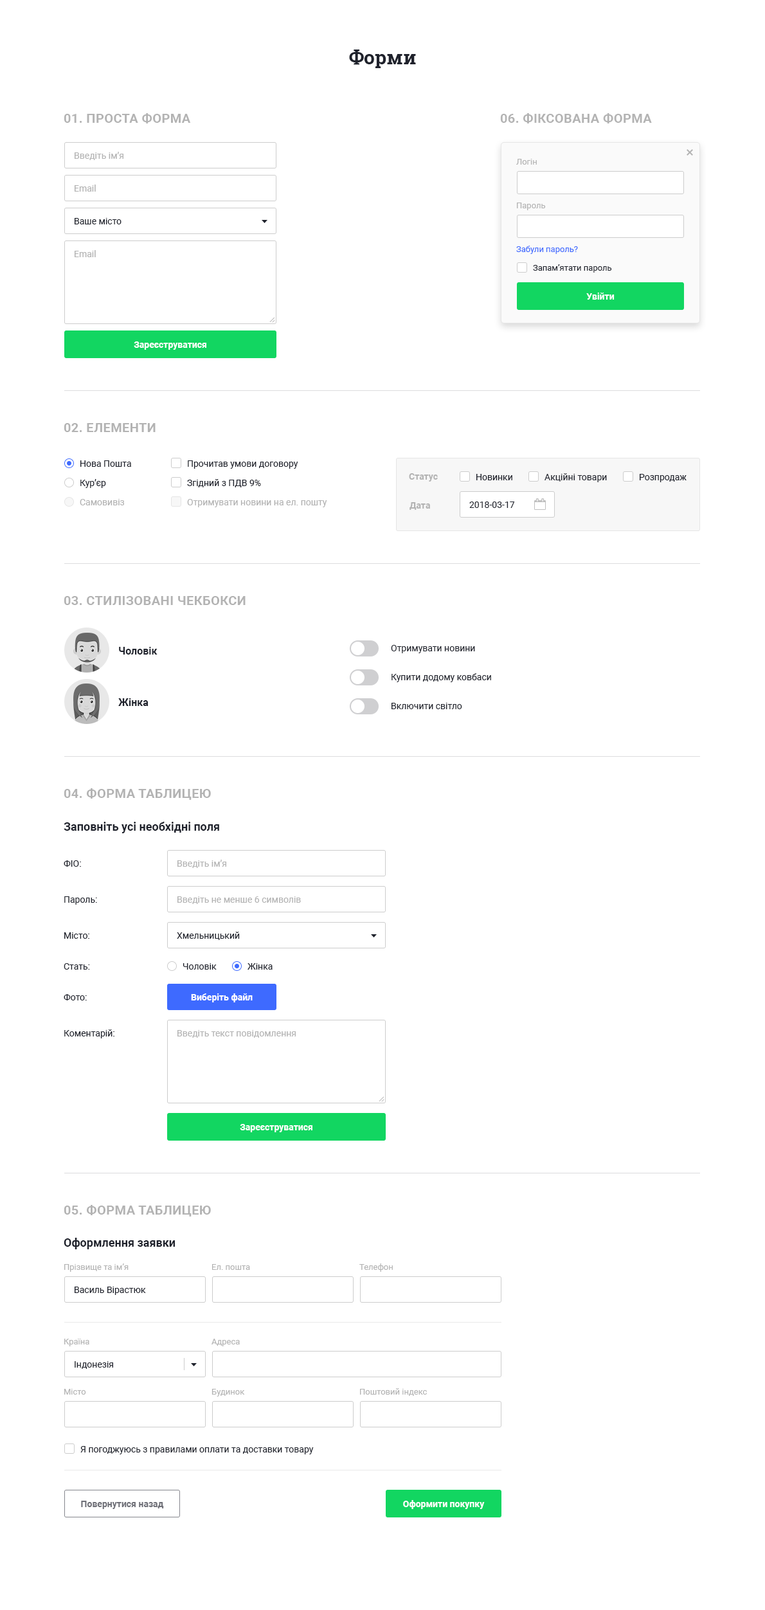
<style>
.page{position:relative;width:765px;height:1610px;background:#ffffff}
.page>*{position:absolute;margin:0}
.t1{font:19.3px "RobotoSlab-Bold";color:#1f222c}
.t2{font:12.9px "Roboto-Bold";letter-spacing:0.02em;color:#b3b3b3;text-transform:uppercase}
.t3{font:9px "Roboto-Regular";color:#b3b3b3}
.t4{font:8.4px "Roboto-Regular";color:#b3b3b3}
.t5{font:9px "Roboto-Regular";color:#1f222c}
.t6{font:8.4px "Roboto-Regular";color:#3e6aff}
.t7{font:8.4px "Roboto-Regular";color:#1f222c}
.t8{font:9px "Roboto-Bold";color:#ffffff}
.t9{font:9px "Roboto-Bold";color:#b3b3b3}
.t10{font:10.3px "Roboto-Bold";color:#1f222c}
.t11{font:11.6px "Roboto-Bold";color:#1f222c}
.t12{font:9px "Roboto-Bold";color:#6e6f77}
</style>
<div class="page">
<p class="t1" style="left:349px;top:50px;width:67px;height:18px">Форми</p>
<p class="t2" style="left:64px;top:113px;width:127px;height:10px">01. проста форма</p>
<p class="t2" style="left:500px;top:113px;width:152px;height:10px">06. фіксована форма</p>
<p class="t3" style="left:75px;top:152px;width:48px;height:8px">Введіть ім’я</p>
<p class="t4" style="left:516px;top:159px;width:21px;height:6px">Логін</p>
<p class="t3" style="left:75px;top:184px;width:21px;height:8px">Email</p>
<p class="t4" style="left:517px;top:203px;width:29px;height:7px">Пароль</p>
<p class="t5" style="left:75px;top:218px;width:47px;height:6px">Ваше місто</p>
<p class="t6" style="left:516px;top:246px;width:62px;height:8px">Забули пароль?</p>
<p class="t3" style="left:75px;top:250px;width:21px;height:7px">Email</p>
<p class="t7" style="left:533px;top:264px;width:79px;height:9px">Запам’ятати пароль</p>
<p class="t8" style="left:586px;top:292px;width:29px;height:8px">Увійти</p>
<p class="t8" style="left:134px;top:341px;width:72px;height:9px">Зареєструватися</p>
<p class="t2" style="left:64px;top:423px;width:92px;height:9px">02. елементи</p>
<p class="t5" style="left:80px;top:460px;width:51px;height:7px">Нова Пошта</p>
<p class="t5" style="left:188px;top:460px;width:110px;height:9px">Прочитав умови договору</p>
<p class="t9" style="left:409px;top:473px;width:29px;height:9px">Статус</p>
<p class="t5" style="left:476px;top:474px;width:36px;height:6px">Новинки</p>
<p class="t5" style="left:544px;top:473px;width:63px;height:9px">Акційні товари</p>
<p class="t5" style="left:640px;top:474px;width:47px;height:8px">Розпродаж</p>
<p class="t5" style="left:80px;top:479px;width:26px;height:9px">Кур’єр</p>
<p class="t5" style="left:187px;top:479px;width:74px;height:8px">Згідний з ПДВ 9%</p>
<p class="t3" style="left:80px;top:499px;width:44px;height:6px">Самовивіз</p>
<p class="t3" style="left:187px;top:499px;width:140px;height:8px">Отримувати новини на ел. пошту</p>
<p class="t9" style="left:410px;top:502px;width:20px;height:8px">Дата</p>
<p class="t5" style="left:469px;top:501px;width:46px;height:7px">2018-03-17</p>
<p class="t2" style="left:64px;top:596px;width:182px;height:9px">03. стилізовані чекбокси</p>
<p class="t10" style="left:119px;top:647px;width:39px;height:7px">Чоловік</p>
<p class="t5" style="left:391px;top:645px;width:84px;height:8px">Отримувати новини</p>
<p class="t5" style="left:392px;top:673px;width:99px;height:9px">Купити додому ковбаси</p>
<p class="t10" style="left:118px;top:698px;width:30px;height:8px">Жінка</p>
<p class="t5" style="left:392px;top:703px;width:70px;height:6px">Включити світло</p>
<p class="t2" style="left:64px;top:788px;width:147px;height:12px">04. форма таблицею</p>
<p class="t11" style="left:64px;top:822px;width:155px;height:11px">Заповніть усі необхідні поля</p>
<p class="t5" style="left:64px;top:860px;width:17px;height:7px">ФІО:</p>
<p class="t3" style="left:177px;top:860px;width:49px;height:8px">Введіть ім’я</p>
<p class="t5" style="left:64px;top:896px;width:33px;height:9px">Пароль:</p>
<p class="t3" style="left:177px;top:896px;width:124px;height:8px">Введіть не менше 6 символів</p>
<p class="t5" style="left:64px;top:932px;width:25px;height:7px">Місто:</p>
<p class="t5" style="left:177px;top:932px;width:63px;height:8px">Хмельницький</p>
<p class="t5" style="left:64px;top:963px;width:26px;height:6px">Стать:</p>
<p class="t5" style="left:183px;top:963px;width:34px;height:6px">Чоловік</p>
<p class="t5" style="left:248px;top:963px;width:25px;height:6px">Жінка</p>
<p class="t5" style="left:64px;top:994px;width:23px;height:6px">Фото:</p>
<p class="t8" style="left:191px;top:993px;width:62px;height:9px">Виберіть файл</p>
<p class="t5" style="left:64px;top:1029px;width:50px;height:9px">Коментарій:</p>
<p class="t3" style="left:177px;top:1030px;width:119px;height:8px">Введіть текст повідомлення</p>
<p class="t8" style="left:240px;top:1124px;width:72px;height:8px">Зареєструватися</p>
<p class="t2" style="left:64px;top:1205px;width:147px;height:11px">05. форма таблицею</p>
<p class="t11" style="left:64px;top:1238px;width:111px;height:11px">Оформлення заявки</p>
<p class="t4" style="left:64px;top:1263px;width:65px;height:9px">Прізвище та ім’я</p>
<p class="t4" style="left:212px;top:1264px;width:38px;height:6px">Ел. пошта</p>
<p class="t4" style="left:359px;top:1263px;width:34px;height:9px">Телефон</p>
<p class="t5" style="left:75px;top:1286px;width:71px;height:9px">Василь Вірастюк</p>
<p class="t4" style="left:64px;top:1338px;width:25px;height:8px">Країна</p>
<p class="t4" style="left:212px;top:1338px;width:28px;height:8px">Адреса</p>
<p class="t5" style="left:75px;top:1361px;width:38px;height:8px">Індонезія</p>
<p class="t4" style="left:64px;top:1389px;width:22px;height:5px">Місто</p>
<p class="t4" style="left:212px;top:1389px;width:33px;height:7px">Будинок</p>
<p class="t4" style="left:360px;top:1388px;width:67px;height:8px">Поштовий індекс</p>
<p class="t5" style="left:80px;top:1446px;width:234px;height:8px">Я погоджуюсь з правилами оплати та доставки товару</p>
<p class="t12" style="left:81px;top:1500px;width:83px;height:9px">Повернутися назад</p>
<p class="t8" style="left:403px;top:1500px;width:82px;height:9px">Оформити покупку</p>
</div>
